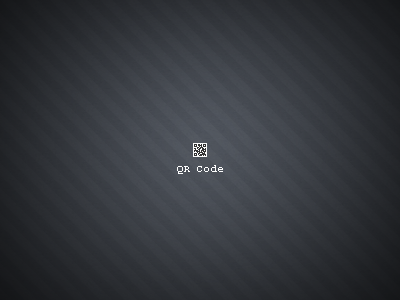
<style>
.page{position:relative;width:400px;height:300px}
.page>*{position:absolute;margin:0}
.t1{font:11px "Courier";color:#fefefe}
</style>
<div class="page">
<p class="t1" style="left:177px;top:165px;width:46px;height:9px">QR Code</p>
</div>
